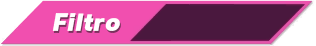
<style>
.page{position:relative;width:316px;height:46px;background:#4a183e}
.page>*{position:absolute;margin:0}
.t1{font:22.7px "RodinPro-UB";letter-spacing:0.01em;color:#fffeff;font-style:italic}
</style>
<div class="page">
<p class="t1" style="left:52px;top:13px;width:68px;height:18px">Filtro</p>
</div>
